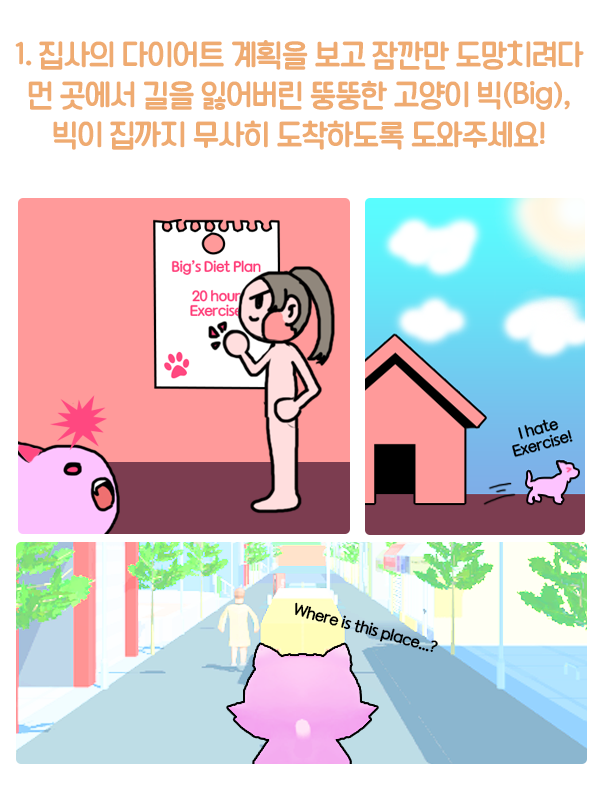
<style>
.page{position:relative;width:600px;height:800px;background:#ffffff}
.page>*{position:absolute;margin:0}
.t1{font:30px/40px "TTAppgulimR";letter-spacing:-0.05em;color:#efab71}
</style>
<div class="page">
<p class="t1" style="left:15px;top:40px;width:569px;height:110px;text-align:center">1. 집사의 다이어트 계획을 보고 잠깐만 도망치려다<br>먼 곳에서 길을 잃어버린 뚱뚱한 고양이 빅(Big),<br>빅이 집까지 무사히 도착하도록 도와주세요!</p>
</div>
